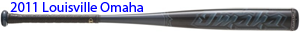
<style>
.page{position:relative;width:300px;height:32px;background:#ffffff}
.page>*{position:absolute;margin:0}
.t1{font:14px "MyriadPro-Regular";color:#0000ff}
</style>
<div class="page">
<p class="t1" style="left:10px;top:2px;width:134px;height:10px">2011 Louisville Omaha</p>
</div>
